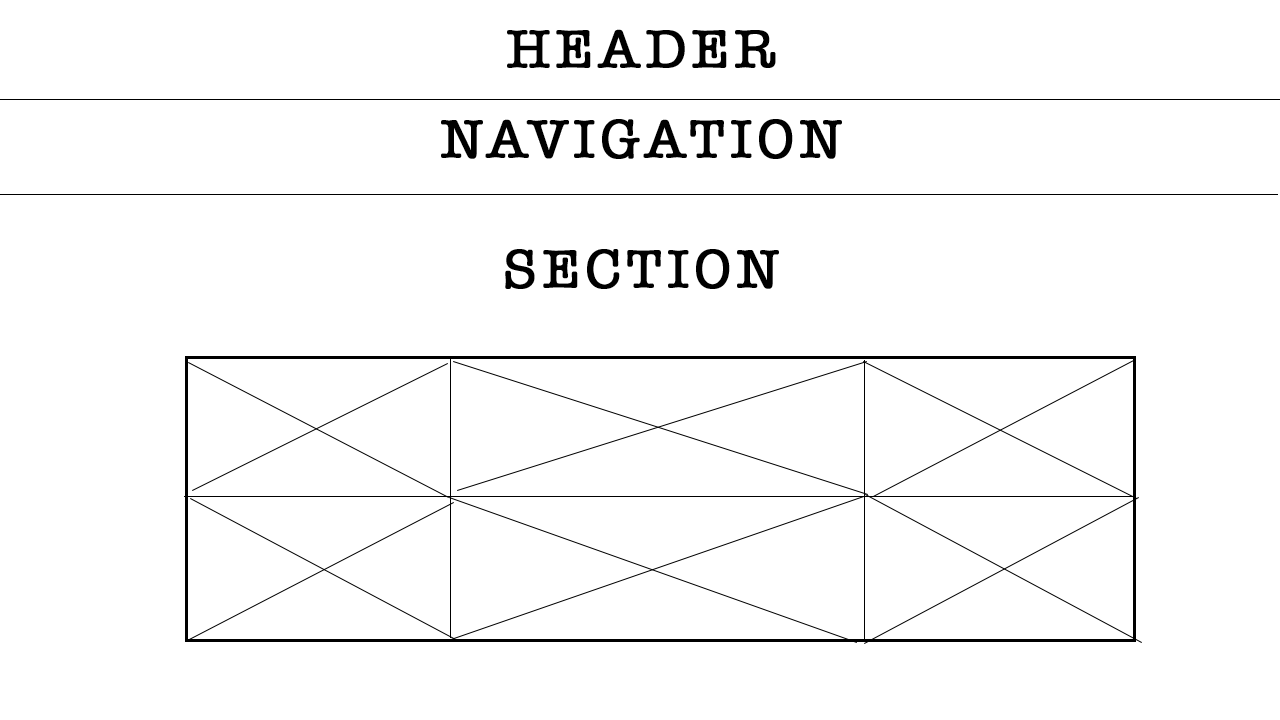
<style>
.page{position:relative;width:1280px;height:720px;background:#ffffff}
.page>*{position:absolute;margin:0}
.t1{font:55px "AmericanTypewriter";letter-spacing:0.08em;color:#000000;text-transform:uppercase;font-weight:bold}
</style>
<div class="page">
<p class="t1" style="left:507px;top:29px;width:269px;height:39px">HEADER</p>
<p class="t1" style="left:441px;top:119px;width:401px;height:40px">NAVIGATION</p>
<p class="t1" style="left:505px;top:249px;width:274px;height:40px">SECTION</p>
</div>
